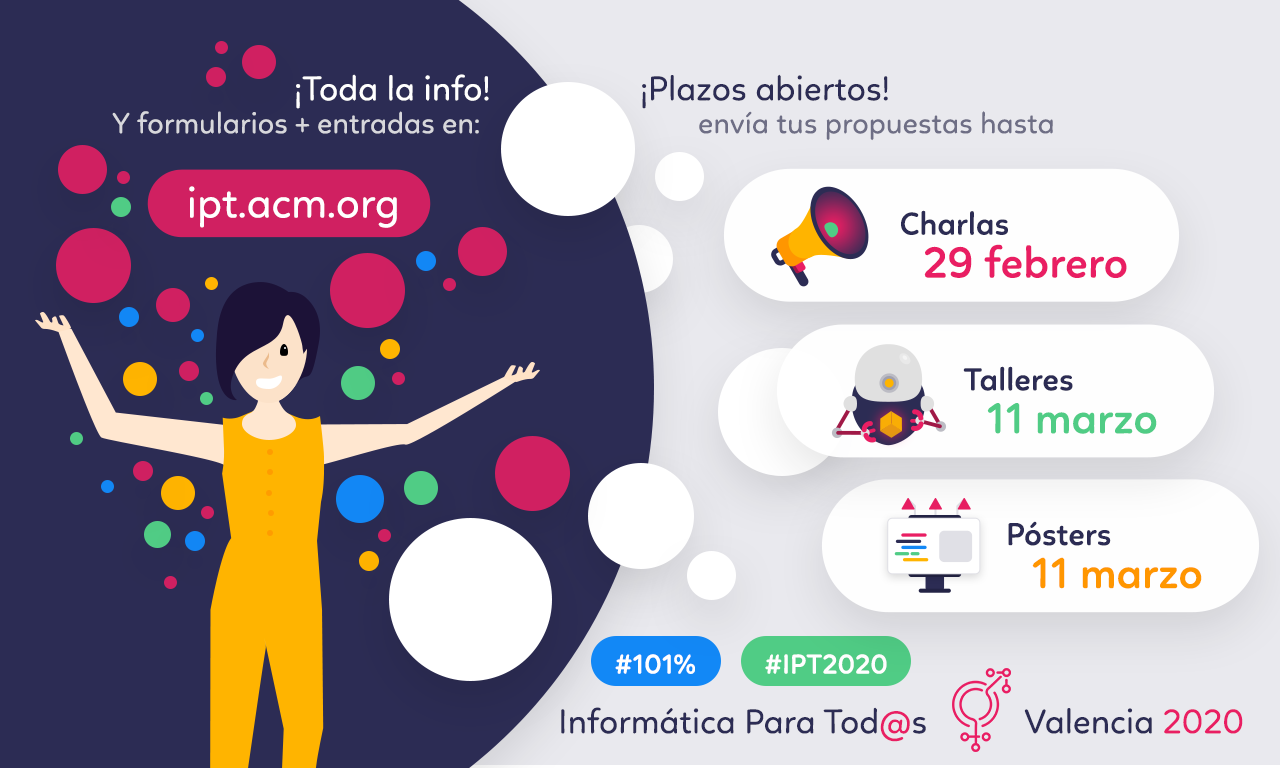
<style>
.page{position:relative;width:1280px;height:768px;background:#2c2c54}
.page>*{position:absolute;margin:0}
.t1{font:35px "Linotte-Regular";color:#ffffff}
.t2{font:35px "Linotte-Regular";color:#2c2c54}
.t3{font:30px "Linotte-Regular";color:#d7d7dc}
.t4{font:30px "Linotte-Regular";color:#6e6e85}
.t5{font:43.8px "Linotte-Regular";color:#ffffff}
.t6{font:32.4px "Linotte-SemiBold";color:#2c2c54}
.t7{font:44.5px "Linotte-SemiBold";color:#e91e63}
.t8{font:44.5px "Linotte-SemiBold";color:#50cc85}
.t9{font:44.5px "Linotte-SemiBold";color:#ff9600}
.t10{font:28px "Linotte-SemiBold";color:#ffffff}
.t11{font:35px "Linotte-Regular";color:#e91e63}
</style>
<div class="page">
<p class="t1" style="left:296px;top:74px;width:193px;height:35px">¡Toda la info!</p>
<p class="t2" style="left:642px;top:74px;width:246px;height:35px">¡Plazos abiertos!</p>
<p class="t3" style="left:112px;top:111px;width:367px;height:23px">Y formularios + entradas en:</p>
<p class="t4" style="left:699px;top:111px;width:354px;height:30px">envía tus propuestas hasta</p>
<p class="t5" style="left:189px;top:186px;width:208px;height:42px">ipt.acm.org</p>
<p class="t6" style="left:901px;top:210px;width:107px;height:25px">Charlas</p>
<p class="t7" style="left:924px;top:244px;width:203px;height:34px">29 febrero</p>
<p class="t6" style="left:963px;top:366px;width:110px;height:25px">Talleres</p>
<p class="t8" style="left:987px;top:403px;width:170px;height:31px">11 marzo</p>
<p class="t6" style="left:1008px;top:521px;width:103px;height:25px">Pósters</p>
<p class="t9" style="left:1032px;top:557px;width:170px;height:32px">11 marzo</p>
<p class="t10" style="left:615px;top:654px;width:80px;height:20px">#101%</p>
<p class="t10" style="left:765px;top:654px;width:122px;height:20px">#IPT2020</p>
<p class="t2" style="left:561px;top:707px;width:365px;height:35px">Informática Para Tod<span class="t11">@</span>s</p>
<p class="t2" style="left:1024px;top:708px;width:219px;height:26px">Valencia <span class="t11">2020</span></p>
</div>
